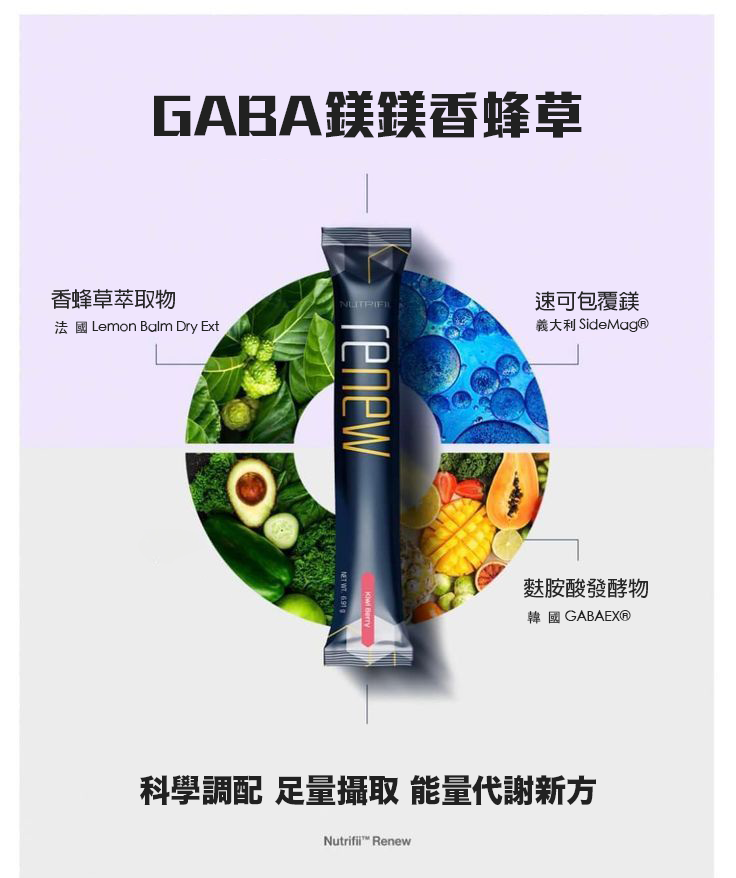
<style>
.page{position:relative;width:736px;height:878px;background:#ececec}
.page>*{position:absolute;margin:0}
.t1{font:52.4px "MStiffHeiHK-UltraBold";color:#212121}
.t2{font:20.9px "AdobeFanHeitiStd-Bold";color:#252525}
.t3{font:13.6px "STHeitiTC-Medium";color:#252525}
.t4{font:31.3px "HiraKakuStdN-W8";color:#212121}
</style>
<div class="page">
<p class="t1" style="left:154px;top:91px;width:428px;height:47px">GABA鎂鎂香蜂草</p>
<p class="t2" style="left:51px;top:289px;width:124px;height:20px">香蜂草萃取物</p>
<p class="t2" style="left:535px;top:291px;width:104px;height:20px">速可包覆鎂</p>
<p class="t3" style="left:535px;top:318px;width:114px;height:14px">義大利 SideMag®</p>
<p class="t3" style="left:54px;top:321px;width:166px;height:13px">法  國 Lemon Balm Dry Ext</p>
<p class="t2" style="left:523px;top:578px;width:125px;height:20px">麩胺酸發酵物</p>
<p class="t3" style="left:527px;top:610px;width:104px;height:14px">韓  國 GABAEX®</p>
<p class="t4" style="left:140px;top:775px;width:456px;height:31px">科學調配 足量攝取 能量代謝新方</p>
</div>
